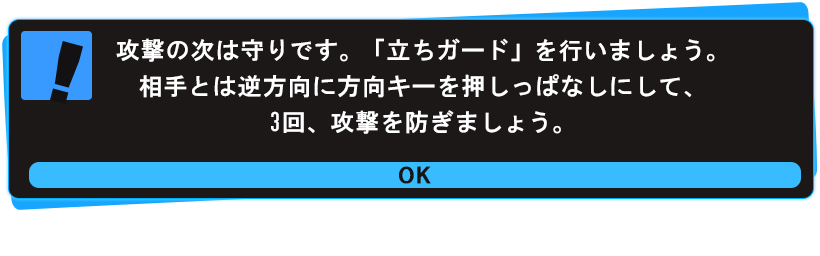
<style>
.page{position:relative;width:820px;height:256px;background:#1d1818}
.page>*{position:absolute;margin:0}
.t1{font:24px/36px "HGGothicE";letter-spacing:0.05em;color:#ffffff}
.t2{font:20.5px "HGSSoeiKakugothicUB";letter-spacing:0.05em;color:#181515;scale:1.22 1}
</style>
<div class="page">
<p class="t1" style="left:116px;top:38px;width:599px;height:96px;text-align:center">攻撃の次は守りです。「立ちガード」を行いましょう。<br>相手とは逆方向に方向キーを押しっぱなしにして、<br>3回、攻撃を防ぎましょう。</p>
<p class="t2" style="left:399px;top:166px;width:32px;height:18px">OK</p>
</div>
